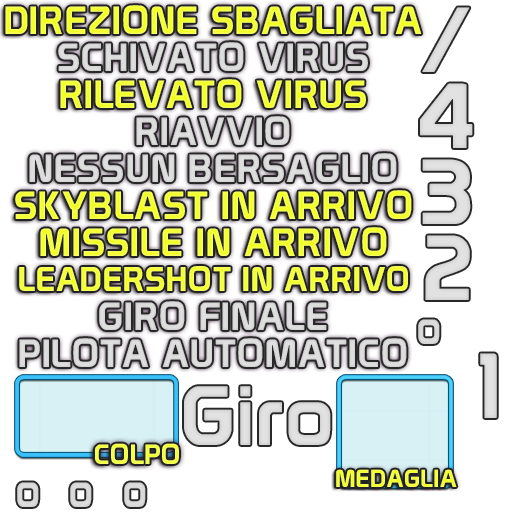
<style>
.page{position:relative;width:512px;height:512px;background:#ffffff}
.page>*{position:absolute;margin:0}
.t1{font:38.5px "Prototype";letter-spacing:0.03em}
.t2{font:38.5px "Prototype";letter-spacing:0.03em;color:#dbdbdb}
.t3{font:33.6px "Prototype";letter-spacing:0.03em}
.t4{font:47.3px "Prototype";letter-spacing:0.03em;color:#d9d9d9;scale:0.87 1}
.t5{font:90px "Prototype";letter-spacing:0.03em;color:#e0e0e0}
.t6{font:27.1px "Prototype";letter-spacing:0.03em;color:#f3ff4a}
.t7{font:24px "Prototype";letter-spacing:0.03em;color:#f3ff41}
</style>
<div class="page">
<p class="t1" style="left:5px;top:5px;width:417px;height:29px">DIREZIONE SBAGLIATA</p>
<p class="t2" style="left:58px;top:42px;width:310px;height:29px">SCHIVATO VIRUS</p>
<p class="t1" style="left:60px;top:79px;width:306px;height:29px">RILEVATO VIRUS</p>
<p class="t2" style="left:136px;top:116px;width:154px;height:29px">RIAVVIO</p>
<p class="t2" style="left:29px;top:153px;width:368px;height:29px">NESSUN BERSAGLIO</p>
<p class="t1" style="left:15px;top:190px;width:397px;height:29px">SKYBLAST IN ARRIVO</p>
<p class="t1" style="left:40px;top:227px;width:347px;height:29px">MISSILE IN ARRIVO</p>
<p class="t3" style="left:19px;top:266px;width:389px;height:25px">LEADERSHOT IN ARRIVO</p>
<p class="t2" style="left:99px;top:301px;width:228px;height:29px">GIRO FINALE</p>
<p class="t4" style="left:418px;top:319px;width:22px;height:25px">o</p>
<p class="t2" style="left:19px;top:338px;width:388px;height:29px">PILOTA AUTOMATICO</p>
<p class="t5" style="left:480px;top:353px;width:17px;height:65px">1</p>
<p class="t6" style="left:95px;top:443px;width:84px;height:21px">COLPO</p>
<p class="t7" style="left:336px;top:469px;width:121px;height:18px">MEDAGLIA</p>
<p class="t4" style="left:17px;top:482px;width:22px;height:25px">o</p>
<p class="t4" style="left:70px;top:482px;width:22px;height:25px">o</p>
<p class="t4" style="left:124px;top:482px;width:22px;height:25px">o</p>
</div>
